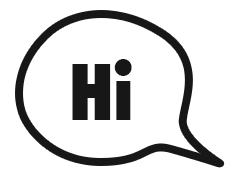
<style>
.page{position:relative;width:234px;height:178px;background:#ffffff}
.page>*{position:absolute;margin:0}
.t1{font:78.4px "FuturaBT-ExtraBlackCondensed";color:#171717}
</style>
<div class="page">
<p class="t1" style="left:72px;top:59px;width:60px;height:61px">Hi</p>
</div>
